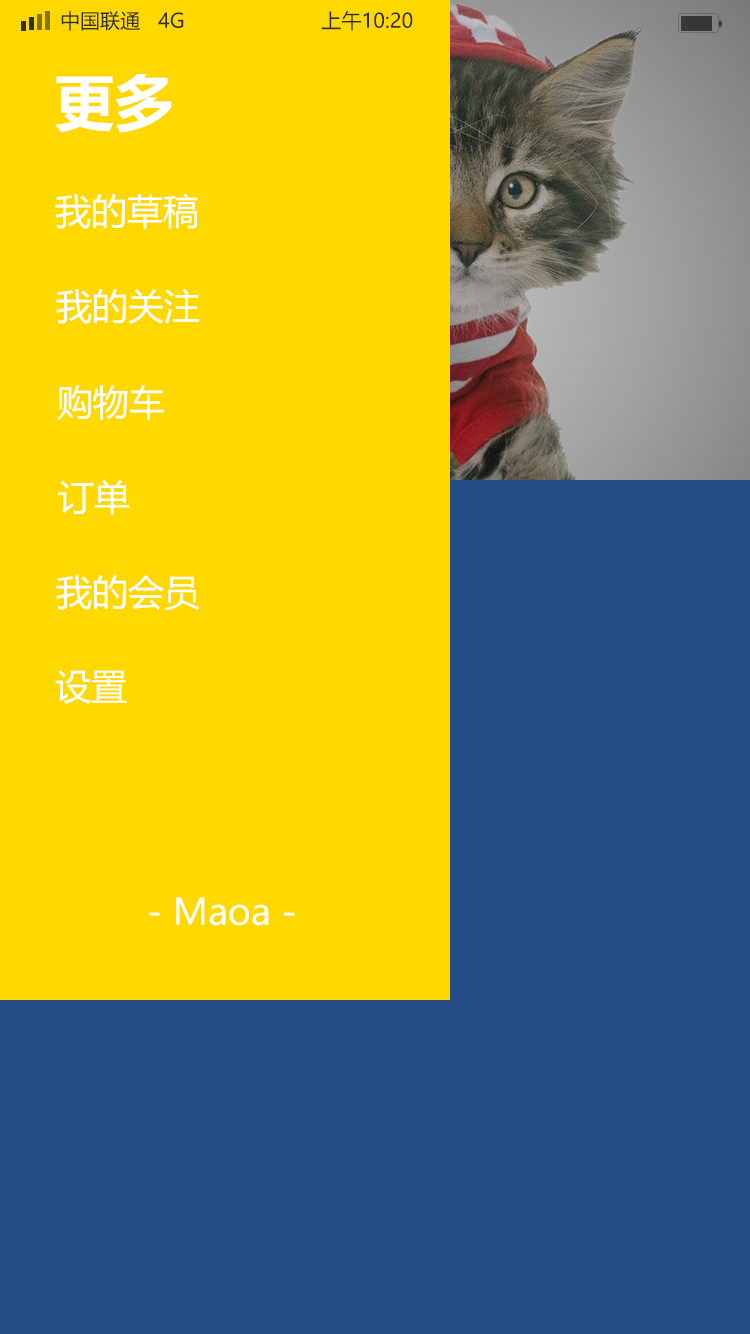
<style>
.page{position:relative;width:750px;height:1334px;background:#ffd800}
.page>*{position:absolute;margin:0}
.t1{font:20px "MicrosoftYaHei";color:#2f2f2f}
.t2{font:60px "MicrosoftYaHei-Bold";color:#ffffff}
.t3{font:36px "MicrosoftYaHei";color:#ffffff}
</style>
<div class="page">
<p class="t1" style="left:61px;top:11px;width:352px;height:20px">中国联通   4G                       上午10:20</p>
<p class="t2" style="left:55px;top:74px;width:117px;height:59px">更多</p>
<p class="t3" style="left:55px;top:193px;width:143px;height:36px">我的草稿</p>
<p class="t3" style="left:56px;top:288px;width:144px;height:36px">我的关注</p>
<p class="t3" style="left:57px;top:385px;width:107px;height:35px">购物车</p>
<p class="t3" style="left:58px;top:479px;width:72px;height:36px">订单</p>
<p class="t3" style="left:56px;top:575px;width:144px;height:36px">我的会员</p>
<p class="t3" style="left:55px;top:670px;width:72px;height:34px">设置</p>
<p class="t3" style="left:149px;top:897px;width:146px;height:29px">- Maoa -</p>
</div>
